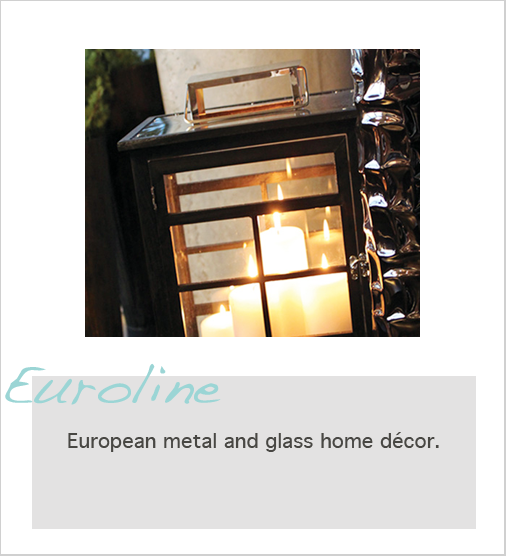
<style>
.page{position:relative;width:506px;height:556px;background:#ffffff}
.page>*{position:absolute;margin:0}
.t1{font:56px "Handwriting-Dakota";color:#9bd5d5}
.t2{font:20px "Geneva";color:#484743}
</style>
<div class="page">
<p class="t1" style="left:5px;top:363px;width:216px;height:42px">Euroline</p>
<p class="t2" style="left:68px;top:432px;width:371px;height:20px">European metal and glass home décor.</p>
</div>
